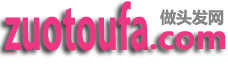
<style>
.page{position:relative;width:228px;height:67px;background:#ffffff}
.page>*{position:absolute;margin:0}
.t1{font:59.6px "MicrosoftYaHei-Bold";color:#ef3682;scale:0.54 1}
.t2{font:16px "MicrosoftYaHei-Bold";color:#878685}
.t3{font:32px "MicrosoftYaHei-Bold";color:#ef3682}
</style>
<div class="page">
<p class="t1" style="left:5px;top:1px;width:143px;height:50px">zuotoufa</p>
<p class="t2" style="left:160px;top:9px;width:64px;height:17px">做头发网</p>
<p class="t3" style="left:150px;top:31px;width:76px;height:19px">.com</p>
</div>
